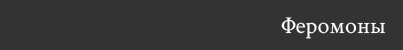
<style>
.page{position:relative;width:403px;height:50px;background:#333333}
.page>*{position:absolute;margin:0}
.t1{font:24px "CrimsonText-Regular";color:#ffffff}
</style>
<div class="page">
<p class="t1" style="left:281px;top:17px;width:104px;height:22px">Феромоны</p>
</div>
